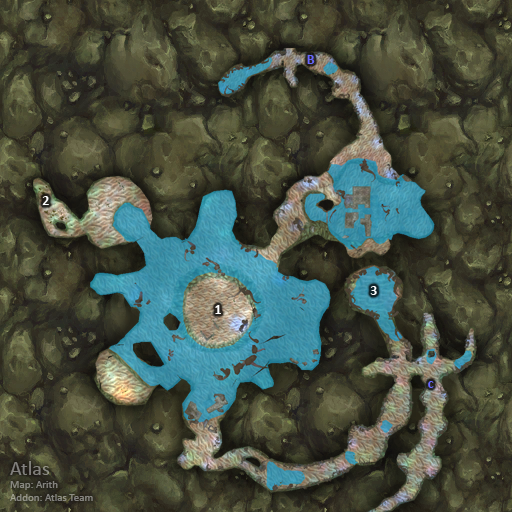
<style>
.page{position:relative;width:512px;height:512px}
.page>*{position:absolute;margin:0}
.t1{font:14px "Calibri-Bold";color:#6666ff}
.t2{font:14px "Calibri-Bold";color:#ffffff}
.t3{font:11px "Calibri";color:#85847f}
.t4{font:20px "Calibri";color:#85847f}
</style>
<div class="page">
<p class="t1" style="left:307px;top:55px;width:8px;height:9px">B</p>
<p class="t2" style="left:42px;top:196px;width:7px;height:9px">2</p>
<p class="t2" style="left:370px;top:286px;width:7px;height:9px">3</p>
<p class="t2" style="left:215px;top:305px;width:6px;height:9px">1</p>
<p class="t1" style="left:428px;top:381px;width:6px;height:7px">c</p>
<p class="t3" style="left:10px;top:461px;width:83px;height:40px"><span class="t4">Atlas<br></span>Map: Arith<br>Addon: Atlas Team</p>
</div>
